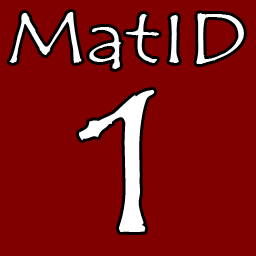
<style>
.page{position:relative;width:256px;height:256px;background:#800000}
.page>*{position:absolute;margin:0}
.t1{font:70.8px/170px "TempusSansITC";color:#ffffff;scale:1.31 1}
.t2{font:200px/170px "TempusSansITC";color:#ffffff;scale:1.31 1}
</style>
<div class="page">
<p class="t1" style="left:9px;top:12px;width:235px;height:220px;text-align:center">MatID<br><span class="t2">1</span></p>
</div>
